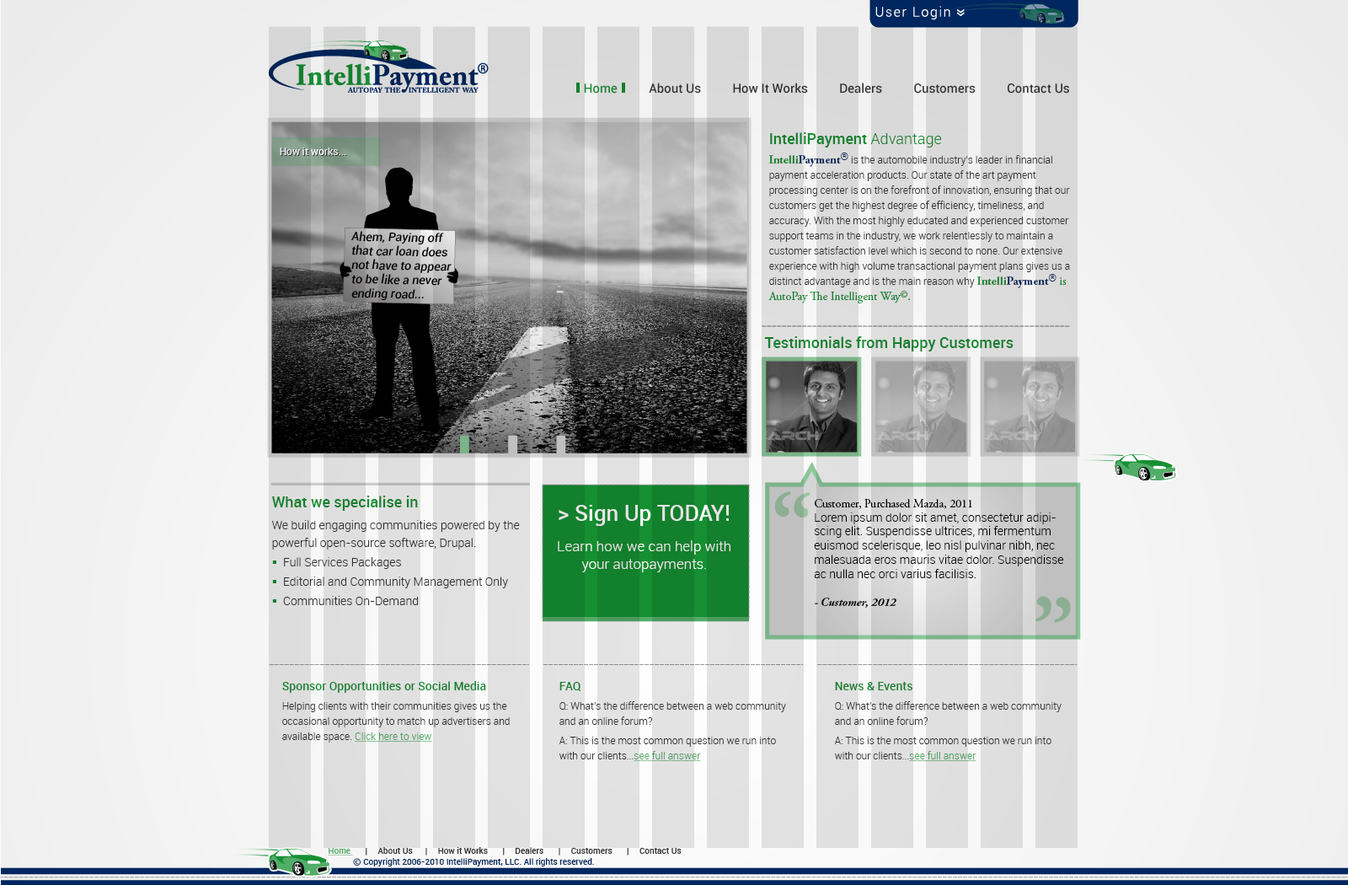
<style>
.page{position:relative;width:1348px;height:885px}
.page>*{position:absolute;margin:0}
.t1{font:12.6px "Roboto-Medium";color:#333333}
.t2{font:12.6px "Roboto-Medium";color:#158f32}
.t3{font:10.1px/15.2px "Roboto-Light";color:#333333}
.t4{font:15.2px "Roboto-Medium";color:#158f32}
.t5{font:15.2px "Roboto-Light";color:#158f32}
.t6{font:11.8px/15.2px "AGaramondPro-Bold";color:#158f32}
.t7{font:11.8px/15.2px "AGaramondPro-Bold";color:#00275f}
.t8{font:10.1px/15.2px "Roboto-Light";color:#00275f}
.t9{font:11.8px/15.2px "AGaramondPro-Regular";color:#158f32}
.t10{font:9.3px/15.2px "AGaramondPro-Regular";color:#158f32}
.t11{font:10.1px "Roboto-Medium";color:#e5e5e5}
.t12{font:10.1px "Roboto-Medium"}
.t13{font:11.8px "Roboto-MediumItalic";color:#000000}
.t14{font:86.9px "AGaramondPro-Bold";color:#8cae93}
.t15{font:14.3px/17.7px "Roboto-Light";color:#e5e5e5}
.t16{font:21.9px/17.7px "Roboto-Medium";color:#e5e5e5}
.t17{font:12.6px/17.7px "Roboto-Light";color:#e5e5e5}
.t18{font:11.8px "Roboto-Light";color:#000000}
.t19{font:11.8px "AGaramondPro-Regular";color:#000000}
.t20{font:11.8px "AGaramondPro-BoldItalic";color:#000000}
.t21{font:11.8px "Roboto-Medium";color:#158f32}
.t22{font:10.1px/15.2px "Roboto-Light";color:#51ac67;text-decoration:underline}
.t23{font:10.1px/15.2px "Roboto-Light";color:#000000}
.t24{font:8.4px "Roboto-Medium";color:#333333}
.t25{font:8.4px "Roboto-Medium";color:#51ac67;text-decoration:underline}
.t26{font:8.4px "Roboto-Medium";color:#00275f}
.t27{font:8.4px "Verdana-Bold";color:#00275f}
</style>
<div class="page">
<p class="t1" style="left:584px;top:83px;width:485px;height:11px"><span class="t2">Home</span>          About Us          How It Works          Dealers          Customers          Contact Us</p>
<p class="t3" style="left:768px;top:132px;width:302px;height:171px"><span class="t4">IntelliPayment</span><span class="t5"> Advantage<br></span><span class="t6">Intelli</span><span class="t7">Payment</span><span class="t8">®</span> is the automobile industry's leader in financial payment acceleration products. Our state of the art payment processing center is on the forefront of innovation, ensuring that our customers get the highest degree of efficiency, timeliness, and accuracy. With the most highly educated and experienced customer support teams in the industry, we work relentlessly to maintain a customer satisfaction level which is second to none. Our extensive experience with high volume transactional payment plans gives us a distinct advantage and is the main reason why <span class="t6">Intelli</span><span class="t7">Payment</span><span class="t8">®</span><span class="t9"> is AutoPay The Intelligent Way</span><span class="t10">©</span><span class="t9">.</span></p>
<p class="t11" style="left:280px;top:147px;width:66px;height:8px">How it works...</p>
<p class="t12" style="left:281px;top:148px;width:66px;height:8px">How it works...</p>
<p class="t13" style="left:351px;top:231px;width:101px;height:70px">Ahem, Paying off that car loan does not have to appear to be like a never ending road...</p>
<p class="t4" style="left:764px;top:336px;width:250px;height:15px">Testimonials from Happy Customers</p>
<p class="t14" style="left:774px;top:491px;width:36px;height:27px">“</p>
<p class="t15" style="left:558px;top:505px;width:172px;height:67px;text-align:center"><span class="t16">&gt; Sign Up TODAY!<br></span>Learn how we can help with <br>your autopayments<span class="t17">.</span></p>
<p class="t18" style="left:814px;top:499px;width:249px;height:108px"><span class="t19">Customer, Purchased Mazda, 2011<br></span>Lorem ipsum dolor sit amet, consectetur adipiscing elit. Suspendisse ultrices, mi fermentum euismod scelerisque, leo nisl pulvinar nibh, nec malesuada eros mauris vitae dolor. Suspendisse ac nulla nec orci varius facilisis.<br><br><span class="t20">- Customer, 2012</span></p>
<p class="t14" style="left:1035px;top:596px;width:36px;height:27px">”</p>
<p class="t3" style="left:282px;top:681px;width:228px;height:61px"><span class="t21">Sponsor Opportunities or Social Media<br></span>Helping clients with their communities gives us the occasional opportunity to match up advertisers and available space. <span class="t22">Click here to view</span></p>
<p class="t3" style="left:559px;top:682px;width:227px;height:79px"><span class="t21">FAQ<br></span>Q: What's the difference between a web community and an online forum?<br>A: This is the most common question we run into with our clients..<span class="t23">.</span><span class="t22">see full answer</span></p>
<p class="t3" style="left:834px;top:682px;width:228px;height:79px"><span class="t21">News &amp; Events<br></span>Q: What's the difference between a web community and an online forum?<br>A: This is the most common question we run into with our clients...<span class="t22">see full answer</span></p>
<p class="t24" style="left:328px;top:847px;width:354px;height:8px"><span class="t25">Home </span>      |     About Us      |     How it Works       |     Dealers       |     Customers       |     Contact Us</p>
<p class="t26" style="left:353px;top:858px;width:241px;height:8px"><span class="t27">©</span> Copyright 2006-2010 IntelliPayment, LLC. All rights reserved.</p>
</div>
